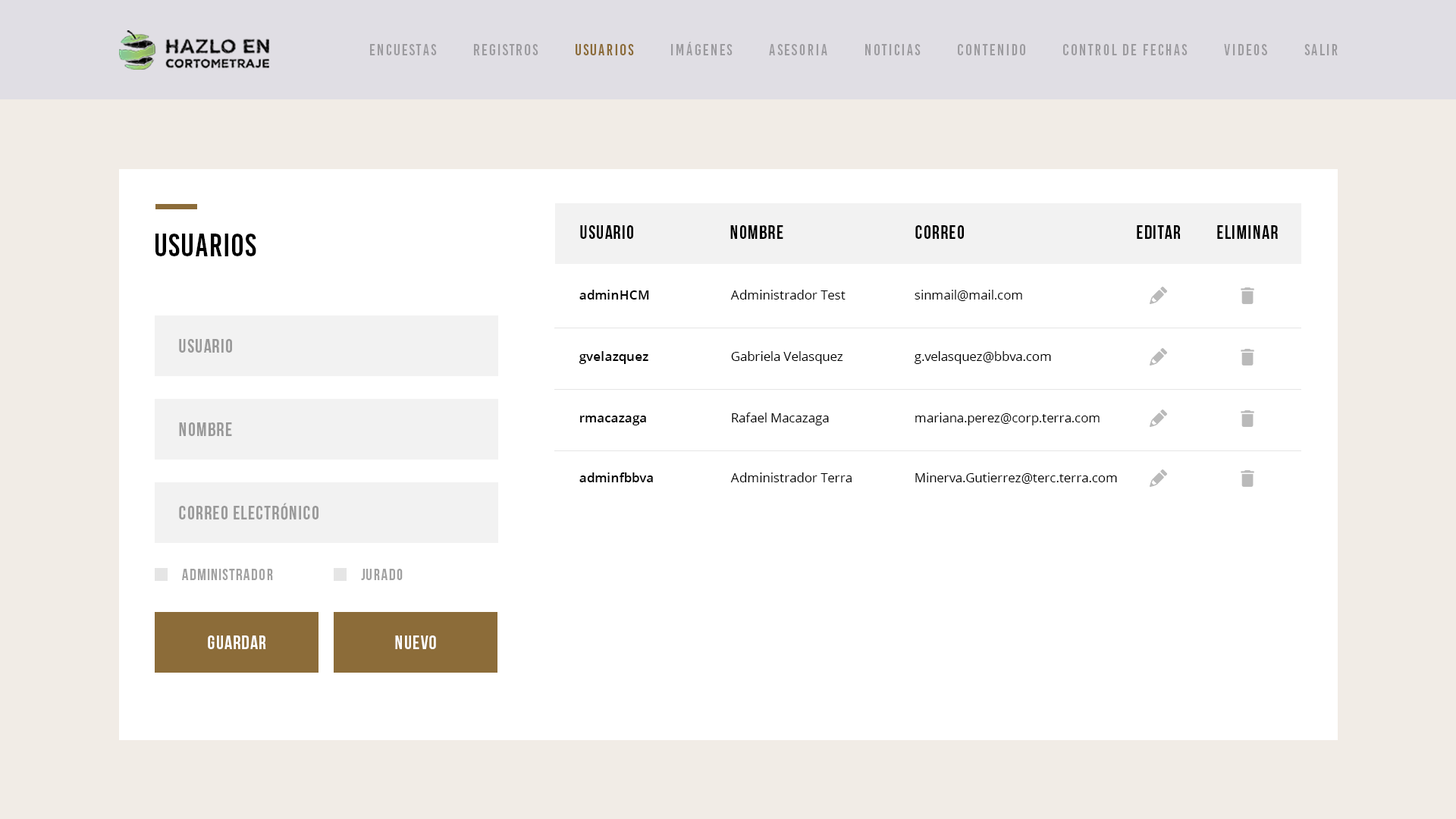
<style>
.page{position:relative;width:1456px;height:819px;background:#ffffff}
.page>*{position:absolute;margin:0}
.t1{font:15.8px "BebasKai";letter-spacing:0.09em;color:#9c9b9f}
.t2{font:15.8px "BebasKai";letter-spacing:0.09em;color:#8c6c39}
.t3{font:31.6px "BebasKai";letter-spacing:0.03em;color:#000000}
.t4{font:19px "BebasNeueBold";letter-spacing:0.05em;color:#000000}
.t5{font:12.6px "OpenSans-Semibold";letter-spacing:0.01em;color:#000000}
.t6{font:12.6px "OpenSans";letter-spacing:0.01em;color:#000000}
.t7{font:19px "BebasNeueBold";letter-spacing:0.05em;color:#999999}
.t8{font:16.2px "BebasNeueBold";letter-spacing:0.05em;color:#a1a1a1}
.t9{font:19px "BebasNeueBold";letter-spacing:0.05em;color:#ffffff}
</style>
<div class="page">
<p class="t1" style="left:671px;top:42px;width:62px;height:13px">Imágenes</p>
<p class="t1" style="left:370px;top:44px;width:67px;height:11px">Encuestas</p>
<p class="t1" style="left:474px;top:44px;width:64px;height:11px">Registros</p>
<p class="t2" style="left:576px;top:44px;width:58px;height:11px">Usuarios</p>
<p class="t1" style="left:769px;top:44px;width:58px;height:11px">Asesoria</p>
<p class="t1" style="left:865px;top:44px;width:56px;height:11px">Noticias</p>
<p class="t1" style="left:958px;top:44px;width:67px;height:11px">Contenido</p>
<p class="t1" style="left:1063px;top:44px;width:125px;height:11px">Control de Fechas</p>
<p class="t1" style="left:1224px;top:44px;width:43px;height:11px">Videos</p>
<p class="t1" style="left:1304px;top:44px;width:34px;height:11px">Salir</p>
<p class="t3" style="left:155px;top:234px;width:101px;height:22px">Usuarios</p>
<p class="t4" style="left:580px;top:225px;width:53px;height:14px">usuario</p>
<p class="t4" style="left:730px;top:225px;width:53px;height:14px">Nombre</p>
<p class="t4" style="left:915px;top:225px;width:49px;height:14px">correo</p>
<p class="t4" style="left:1137px;top:225px;width:44px;height:14px">editar</p>
<p class="t4" style="left:1217px;top:225px;width:61px;height:14px">eliminar</p>
<p class="t5" style="left:579px;top:290px;width:70px;height:10px">adminHCM</p>
<p class="t6" style="left:730px;top:290px;width:116px;height:10px">Administrador Test</p>
<p class="t6" style="left:915px;top:290px;width:107px;height:11px">sinmail@mail.com</p>
<p class="t7" style="left:179px;top:339px;width:53px;height:14px">Usuario</p>
<p class="t5" style="left:579px;top:351px;width:69px;height:13px">gvelazquez</p>
<p class="t6" style="left:731px;top:351px;width:112px;height:13px">Gabriela Velasquez</p>
<p class="t6" style="left:915px;top:351px;width:136px;height:13px">g.velasquez@bbva.com</p>
<p class="t6" style="left:732px;top:413px;width:97px;height:12px">Rafael Macazaga</p>
<p class="t6" style="left:915px;top:413px;width:185px;height:12px">mariana.perez@corp.terra.com</p>
<p class="t7" style="left:179px;top:422px;width:53px;height:14px">Nombre</p>
<p class="t5" style="left:580px;top:416px;width:66px;height:9px">rmacazaga</p>
<p class="t5" style="left:579px;top:472px;width:74px;height:10px">adminfbbva</p>
<p class="t6" style="left:730px;top:472px;width:122px;height:10px">Administrador Terra</p>
<p class="t6" style="left:915px;top:472px;width:202px;height:12px">Minerva.Gutierrez@terc.terra.com</p>
<p class="t7" style="left:179px;top:503px;width:139px;height:17px">Correo electrónico</p>
<p class="t8" style="left:182px;top:569px;width:91px;height:11px">Administrador</p>
<p class="t8" style="left:361px;top:569px;width:42px;height:11px">Jurado</p>
<p class="t9" style="left:208px;top:635px;width:58px;height:14px">guardar</p>
<p class="t9" style="left:395px;top:635px;width:41px;height:14px">Nuevo</p>
</div>
